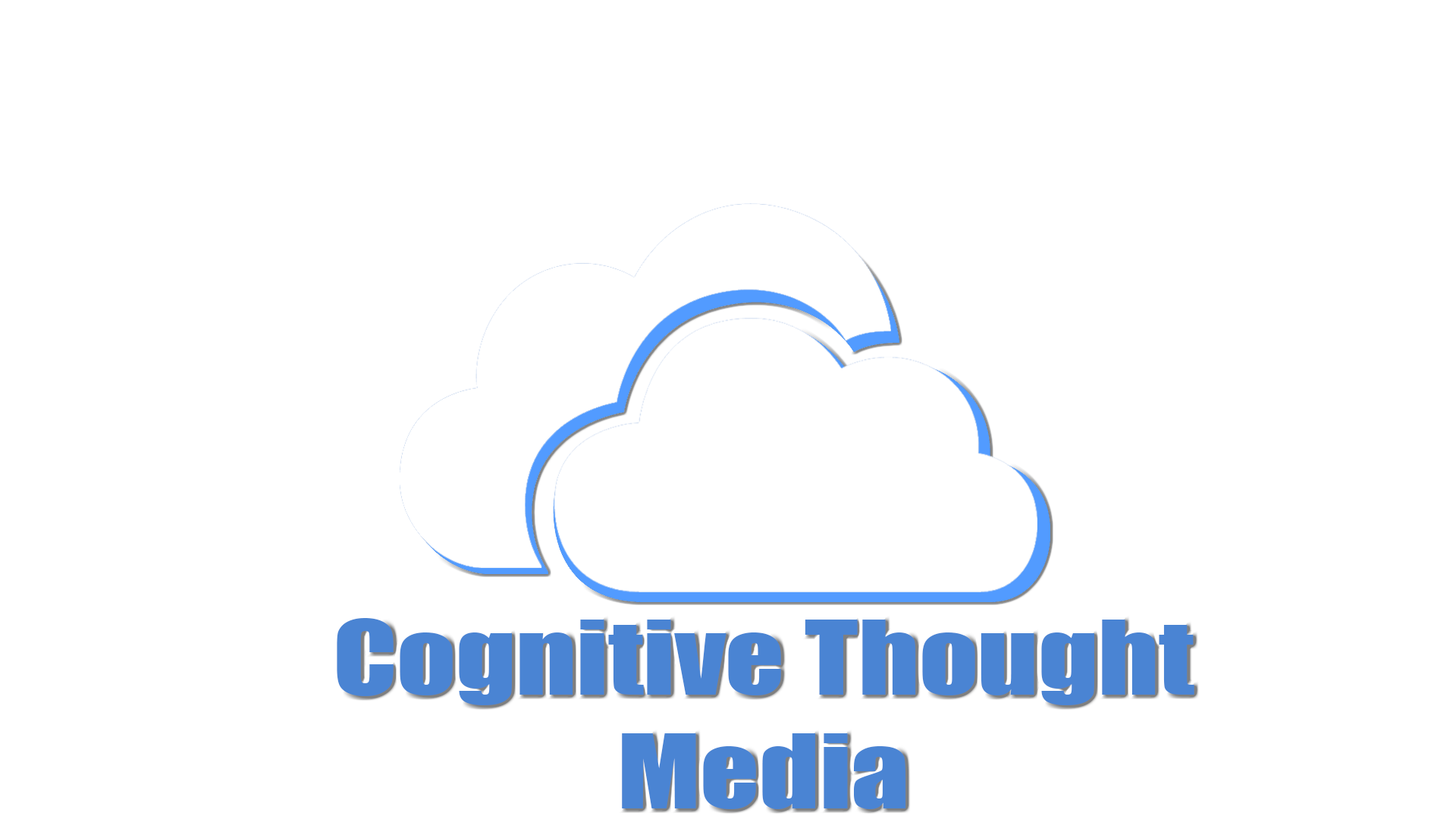
<style>
.page{position:relative;width:1456px;height:819px;background:#ffffff}
.page>*{position:absolute;margin:0}
.t1{font:94.8px "Impact";color:#4a84d3;scale:1.22 1}
</style>
<div class="page">
<p class="t1" style="left:337px;top:618px;width:857px;height:191px;text-align:center">Cognitive Thought<br>Media</p>
</div>
